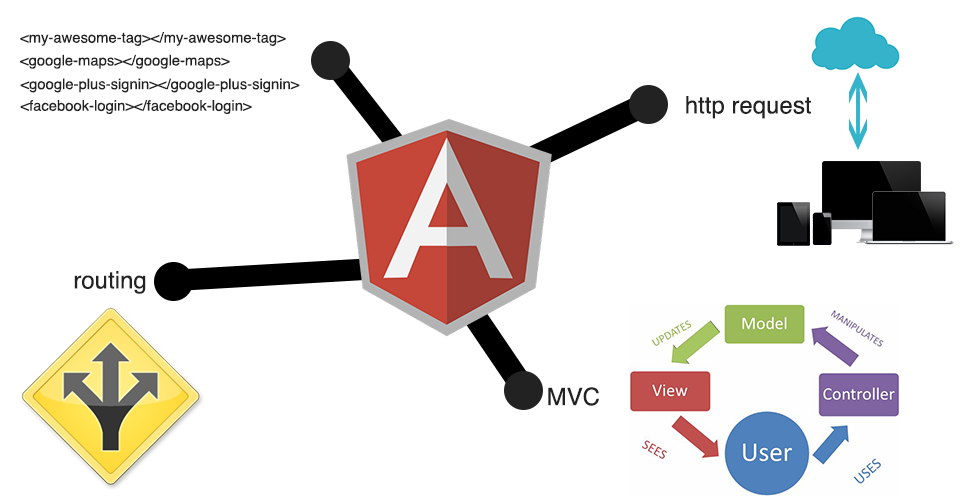
<style>
.page{position:relative;width:960px;height:500px;background:#ffffff}
.page>*{position:absolute;margin:0}
.t1{font:14.7px "Helvetica";color:#222222}
.t2{font:24px "Helvetica";color:#222222}
</style>
<div class="page">
<p class="t1" style="left:20px;top:32px;width:266px;height:14px">&lt;my-awesome-tag&gt;&lt;/my-awesome-tag&gt;</p>
<p class="t1" style="left:20px;top:54px;width:210px;height:15px">&lt;google-maps&gt;&lt;/google-maps&gt;</p>
<p class="t1" style="left:20px;top:78px;width:280px;height:15px">&lt;google-plus-signin&gt;&lt;/google-plus-signin&gt;</p>
<p class="t1" style="left:20px;top:100px;width:232px;height:14px">&lt;facebook-login&gt;&lt;/facebook-login&gt;</p>
<p class="t2" style="left:686px;top:96px;width:125px;height:23px">http request</p>
<p class="t2" style="left:74px;top:271px;width:72px;height:23px">routing</p>
<p class="t2" style="left:548px;top:387px;width:51px;height:19px">MVC</p>
</div>
